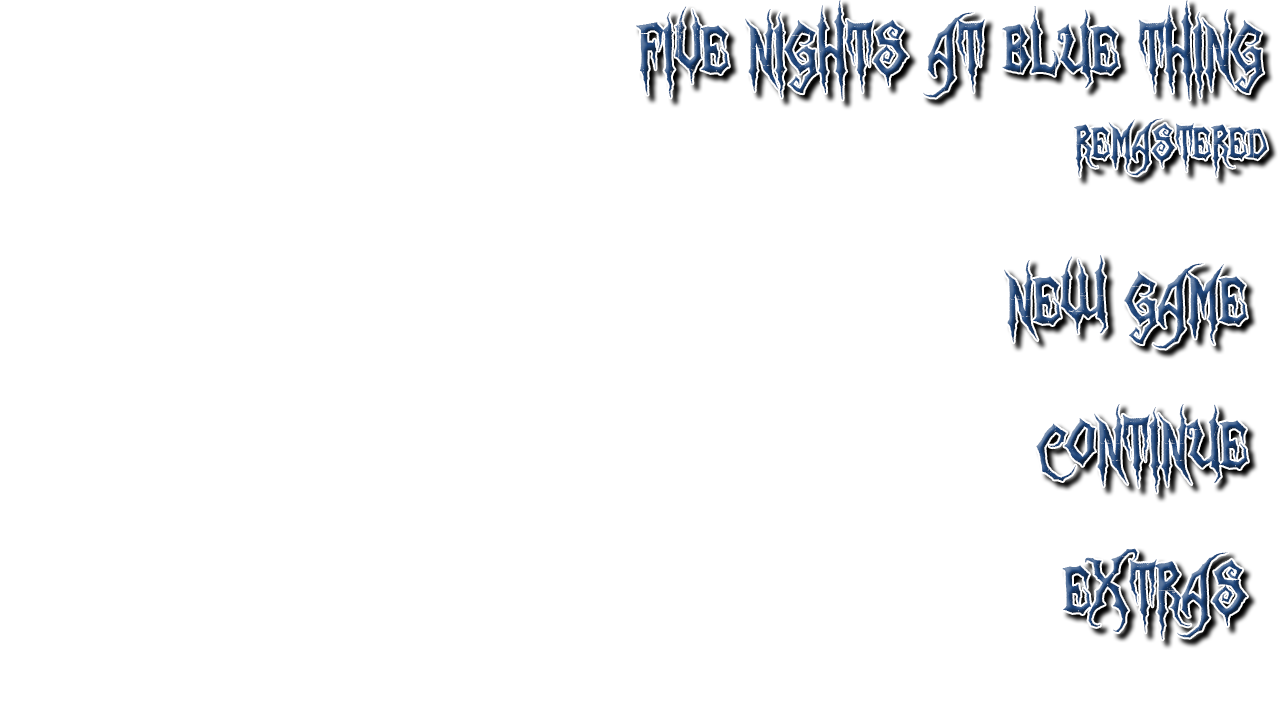
<style>
.page{position:relative;width:1280px;height:720px;background:#ffffff}
.page>*{position:absolute;margin:0}
.t1{font:72px "ZombieHolocaust"}
.t2{font:48px "ZombieHolocaust"}
</style>
<div class="page">
<p class="t1" style="left:636px;top:0px;width:632px;height:177px">FIVE NIGHTS AT BLUE THING<br>              <span class="t2">Remastered</span></p>
<p class="t1" style="left:1004px;top:255px;width:243px;height:94px">New Game</p>
<p class="t1" style="left:1036px;top:404px;width:212px;height:89px">Continue</p>
<p class="t1" style="left:1062px;top:548px;width:185px;height:92px">Extras</p>
</div>
